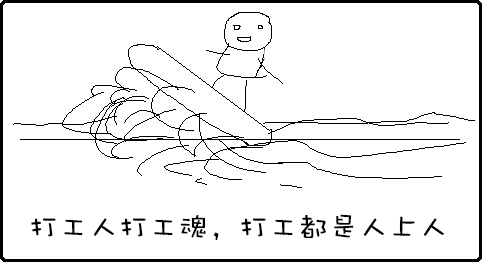
<style>
.page{position:relative;width:482px;height:262px;background:#ffffff}
.page>*{position:absolute;margin:0}
.t1{font:30px "DFPWaWaW5";color:#000000}
</style>
<div class="page">
<p class="t1" style="left:31px;top:214px;width:413px;height:27px">打工人打工魂，打工都是人上人</p>
</div>
